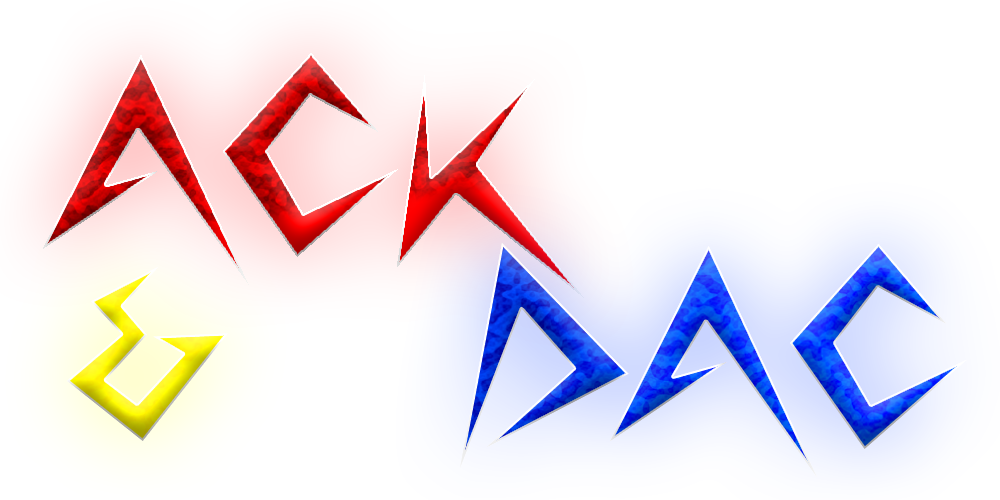
<style>
.page{position:relative;width:1000px;height:500px;background:#ffffff}
.page>*{position:absolute;margin:0}
.t1{font:350.1px "Lightningvolt"}
.t2{font:350px "Lightningvolt"}
.t3{font:314.2px "Lightningvolt"}
</style>
<div class="page">
<p class="t1" style="left:43px;top:53px;width:541px;height:245px">ACK</p>
<p class="t2" style="left:460px;top:243px;width:507px;height:234px">DAC</p>
<p class="t3" style="left:67px;top:267px;width:161px;height:174px">&amp;</p>
</div>
